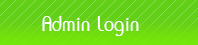
<style>
.page{position:relative;width:198px;height:45px}
.page>*{position:absolute;margin:0}
.t1{font:32.3px "DSNSingle";color:#ffffff}
</style>
<div class="page">
<p class="t1" style="left:42px;top:16px;width:97px;height:20px">Admin Login</p>
</div>
